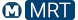
<style>
.page{position:relative;width:78px;height:20px;background:#014171}
.page>*{position:absolute;margin:0}
.t1{font:20px "Roboto-Light";letter-spacing:0.01em;color:#ffffff}
</style>
<div class="page">
<p class="t1" style="left:31px;top:2px;width:40px;height:16px">MRT</p>
</div>
